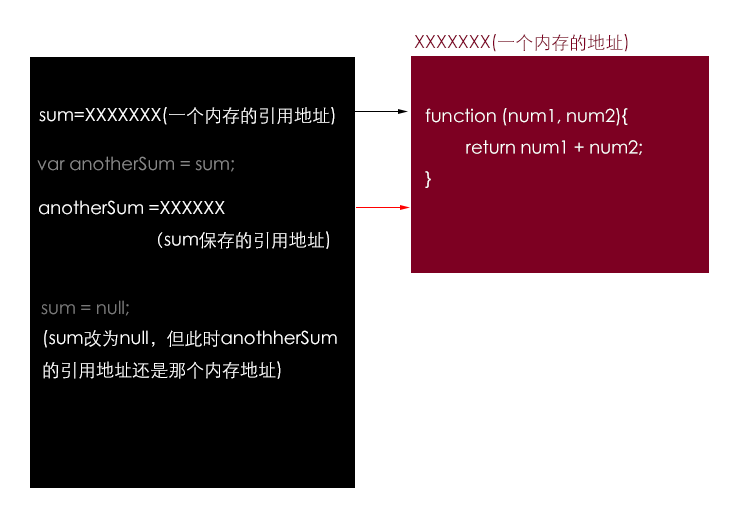
<style>
.page{position:relative;width:746px;height:532px;background:#ffffff}
.page>*{position:absolute;margin:0}
.t1{font:18px "STXihei";color:#7d0022}
.t2{font:18px "STXihei";color:#ffffff}
.t3{font:18px "STXihei";color:#888888}
.t4{font:18px "STXihei";color:#797979}
</style>
<div class="page">
<p class="t1" style="left:414px;top:34px;width:214px;height:18px">XXXXXXX(一个内存的地址)</p>
<p class="t2" style="left:39px;top:107px;width:296px;height:18px">sum=XXXXXXX(一个内存的引用地址)</p>
<p class="t2" style="left:425px;top:108px;width:217px;height:80px">function (num1, num2){<br>         return num1 + num2;<br>}</p>
<p class="t3" style="left:37px;top:156px;width:197px;height:16px">var anotherSum = sum;</p>
<p class="t2" style="left:39px;top:200px;width:290px;height:49px">anotherSum =XXXXXX<br>   （sum保存的引用地址)</p>
<p class="t4" style="left:41px;top:300px;width:88px;height:16px">sum = null;</p>
<p class="t2" style="left:43px;top:330px;width:294px;height:49px">(sum改为null，但此时anothherSum<br>的引用地址还是那个内存地址)</p>
</div>
